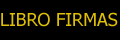
<style>
.page{position:relative;width:120px;height:40px;background:#000000}
.page>*{position:absolute;margin:0}
.t1{font:18px "Tahoma";color:#debe07}
</style>
<div class="page">
<p class="t1" style="left:1px;top:12px;width:117px;height:15px">LIBRO FIRMAS</p>
</div>
